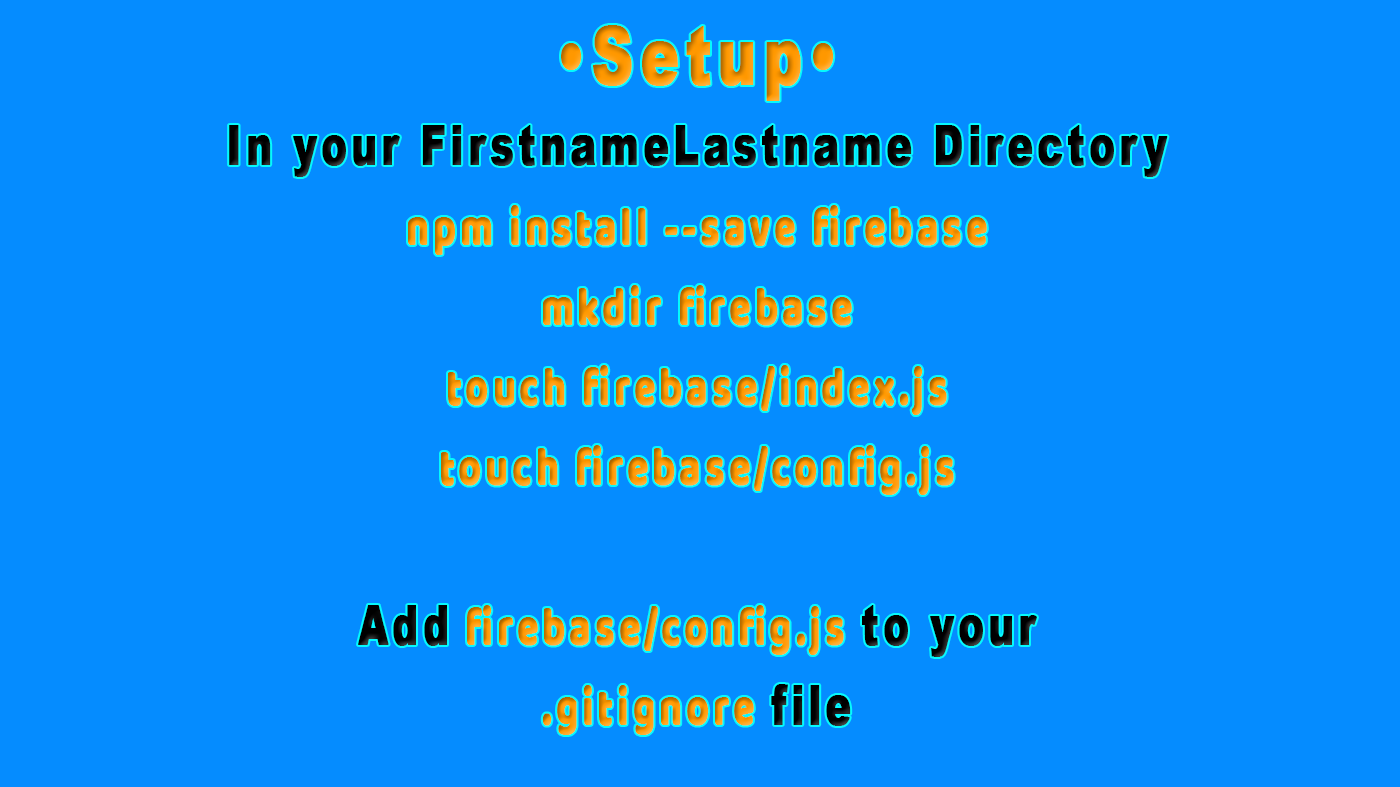
<style>
.page{position:relative;width:1400px;height:787px;background:#058cff}
.page>*{position:absolute;margin:0}
.t1{font:53.8px/80px "Baloo";letter-spacing:0.1em;font-weight:bold;scale:0.71 1}
.t2{font:80.6px/80px "Arial-Black";letter-spacing:0.1em;font-weight:bold;scale:0.71 1}
.t3{font:53.8px/80px "Arial-Black";letter-spacing:0.1em;font-weight:bold;scale:0.71 1}
</style>
<div class="page">
<p class="t1" style="left:229px;top:25px;width:939px;height:710px;text-align:center"><span class="t2">•Setup•<br></span><span class="t3">In your FirstnameLastname Directory<br></span>npm install --save firebase <br>mkdir firebase<br>touch firebase/index.js<br>touch firebase/config.js<br><br><span class="t3">Add</span> firebase/config.js <span class="t3">to your<br></span>.gitignore <span class="t3">file</span></p>
</div>
